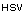
<style>
.page{position:relative;width:24px;height:16px;background:#ffffff}
.page>*{position:absolute;margin:0}
.t1{font:10px "Helvetica";color:#000000}
</style>
<div class="page">
<p class="t1" style="left:2px;top:4px;width:20px;height:7px">HSV</p>
</div>
